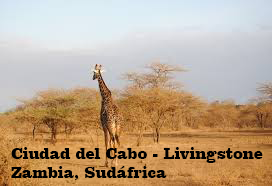
<style>
.page{position:relative;width:272px;height:186px}
.page>*{position:absolute;margin:0}
.t1{font:16px "ClarendonBT-Black";color:#000000}
</style>
<div class="page">
<p class="t1" style="left:11px;top:147px;width:252px;height:33px">Ciudad del Cabo - Livingstone<br>Zambia, Sudáfrica</p>
</div>
